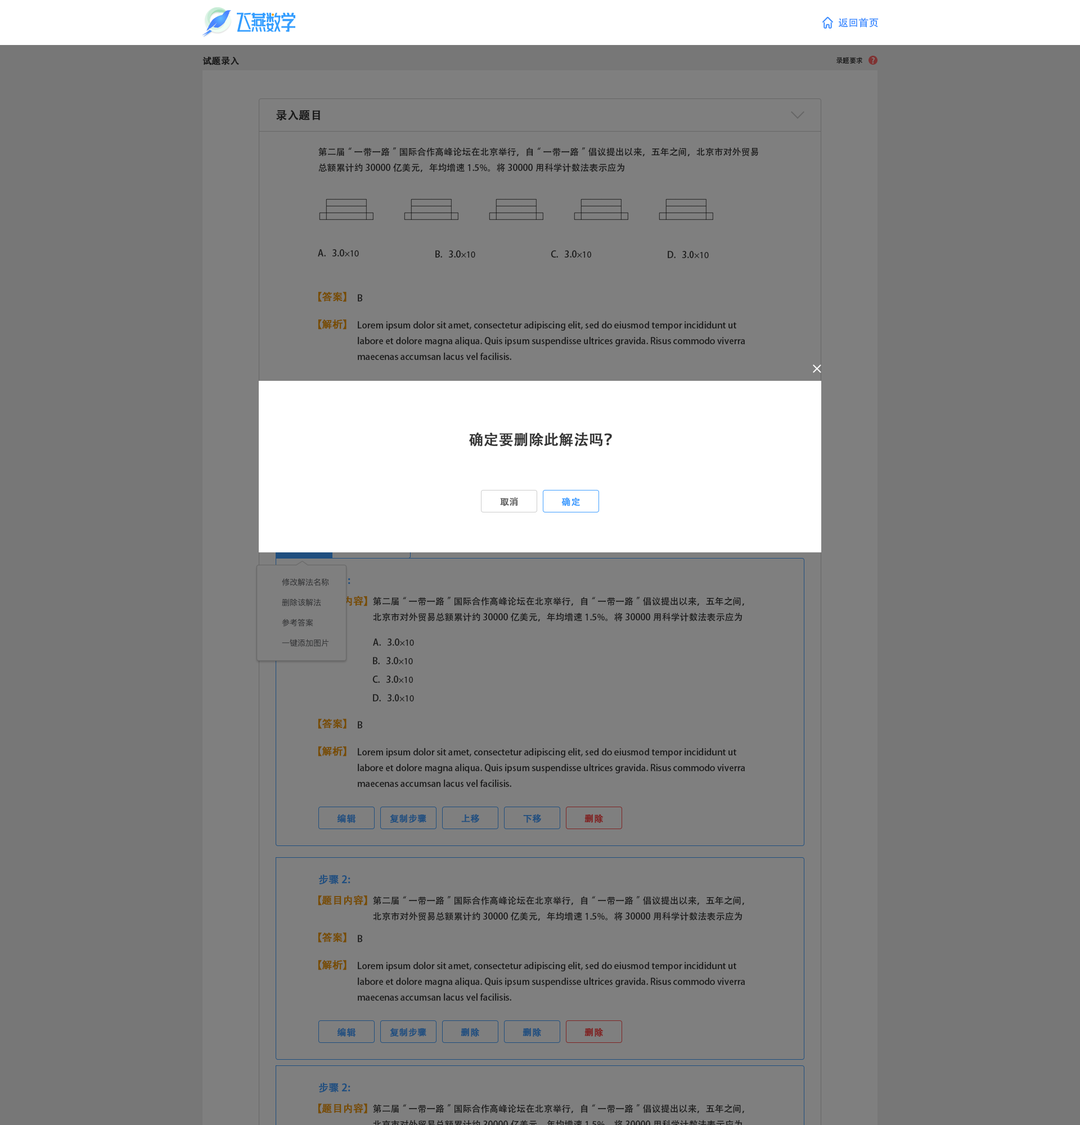
<style>
.page{position:relative;width:1080px;height:1125px;background:#7f7f7f}
.page>*{position:absolute;margin:0}
.t1{font:10.1px "AdobeHeitiStd-Regular";color:#408eff}
.t2{font:9px "AdobeHeitiStd-Regular";color:#191919;font-weight:bold}
.t3{font:6.8px "AdobeHeitiStd-Regular";color:#191919}
.t4{font:7.9px "AdobeHeitiStd-Regular";color:#7f7f7f}
.t5{font:11.2px "AdobeHeitiStd-Regular";color:#191919;font-weight:bold}
.t6{font:9px "AdobeHeitiStd-Regular";color:#191919}
.t7{font:9px "MyriadPro-Regular";color:#191919}
.t8{font:10.1px "AdobeHeitiStd-Regular";color:#774c00;font-weight:bold}
.t9{font:14.6px "AdobeHeitiStd-Regular";color:#333333;font-weight:bold}
.t10{font:9px "AdobeHeitiStd-Regular";color:#666666;font-weight:bold}
.t11{font:9px "AdobeHeitiStd-Regular";color:#409eff;font-weight:bold}
.t12{font:10.1px "AdobeHeitiStd-Regular";font-weight:bold}
.t13{font:9px "AdobeHeitiStd-Regular";color:#204f7f;font-weight:bold}
.t14{font:9px "AdobeHeitiStd-Regular";color:#7f2424;font-weight:bold}
.t15{font:10.1px "AdobeHeitiStd-Regular";color:#204f7f;font-weight:bold}
</style>
<div class="page">
<p class="t1" style="left:838px;top:17px;width:41px;height:11px">返回首页</p>
<p class="t2" style="left:202px;top:56px;width:37px;height:9px">试题录入</p>
<p class="t3" style="left:836px;top:57px;width:26px;height:7px">录题要求</p>
<p class="t4" style="left:871px;top:57px;width:4px;height:7px">?</p>
<p class="t5" style="left:276px;top:110px;width:44px;height:11px">录入题目</p>
<p class="t6" style="left:318px;top:147px;width:440px;height:25px">第二届“一带一路”国际合作高峰论坛在北京举行，自“一带一路”倡议提出以来，五年之间，北京市对外贸易总额累计约30000亿美元，年均增速1.5%。将30000用科学计数法表示应为</p>
<p class="t6" style="left:318px;top:249px;width:41px;height:7px">A.   3.0<span class="t7">×10</span></p>
<p class="t6" style="left:435px;top:250px;width:40px;height:8px">B.   3.0<span class="t7">×10</span></p>
<p class="t6" style="left:551px;top:250px;width:40px;height:8px">C.   3.0<span class="t7">×10</span></p>
<p class="t6" style="left:668px;top:251px;width:41px;height:7px">D.   3.0<span class="t7">×10</span></p>
<p class="t8" style="left:318px;top:291px;width:28px;height:11px">【答案】</p>
<p class="t6" style="left:358px;top:294px;width:5px;height:8px">B</p>
<p class="t8" style="left:318px;top:319px;width:28px;height:11px">【解析】</p>
<p class="t6" style="left:358px;top:321px;width:387px;height:39px">Lorem ipsum dolor sit amet, consectetur adipiscing elit, sed do eiusmod tempor incididunt ut labore et dolore magna aliqua. Quis ipsum suspendisse ultrices gravida. Risus commodo viverra maecenas accumsan lacus vel facilisis.</p>
<p class="t9" style="left:469px;top:432px;width:143px;height:15px">确定要删除此解法吗？</p>
<p class="t10" style="left:500px;top:497px;width:18px;height:9px">取消</p>
<p class="t11" style="left:561px;top:497px;width:19px;height:9px">确定</p>
<p class="t12" style="left:318px;top:596px;width:49px;height:10px">【题目内容】</p>
<p class="t6" style="left:373px;top:597px;width:371px;height:25px">第二届“一带一路”国际合作高峰论坛在北京举行，自“一带一路”倡议提出以来，五年之间，北京市对外贸易总额累计约30000亿美元，年均增速1.5%。将30000用科学计数法表示应为</p>
<p class="t6" style="left:373px;top:638px;width:41px;height:8px">A.   3.0<span class="t7">×10</span></p>
<p class="t6" style="left:373px;top:657px;width:40px;height:7px">B.   3.0<span class="t7">×10</span></p>
<p class="t6" style="left:372px;top:676px;width:41px;height:7px">C.   3.0<span class="t7">×10</span></p>
<p class="t6" style="left:373px;top:694px;width:41px;height:7px">D.   3.0<span class="t7">×10</span></p>
<p class="t8" style="left:318px;top:718px;width:28px;height:11px">【答案】</p>
<p class="t6" style="left:358px;top:721px;width:5px;height:7px">B</p>
<p class="t8" style="left:318px;top:746px;width:28px;height:11px">【解析】</p>
<p class="t6" style="left:358px;top:748px;width:387px;height:39px">Lorem ipsum dolor sit amet, consectetur adipiscing elit, sed do eiusmod tempor incididunt ut labore et dolore magna aliqua. Quis ipsum suspendisse ultrices gravida. Risus commodo viverra maecenas accumsan lacus vel facilisis.</p>
<p class="t13" style="left:337px;top:814px;width:19px;height:10px">编辑</p>
<p class="t13" style="left:390px;top:814px;width:36px;height:9px">复制步骤</p>
<p class="t13" style="left:461px;top:814px;width:18px;height:9px">上移</p>
<p class="t13" style="left:523px;top:814px;width:18px;height:9px">下移</p>
<p class="t14" style="left:584px;top:814px;width:20px;height:9px">删除</p>
<p class="t15" style="left:319px;top:874px;width:31px;height:11px">步骤2:</p>
<p class="t8" style="left:318px;top:895px;width:49px;height:11px">【题目内容】</p>
<p class="t6" style="left:373px;top:896px;width:371px;height:25px">第二届“一带一路”国际合作高峰论坛在北京举行，自“一带一路”倡议提出以来，五年之间，北京市对外贸易总额累计约30000亿美元，年均增速1.5%。将30000用科学计数法表示应为</p>
<p class="t8" style="left:318px;top:932px;width:28px;height:11px">【答案】</p>
<p class="t6" style="left:358px;top:935px;width:5px;height:7px">B</p>
<p class="t8" style="left:318px;top:960px;width:28px;height:10px">【解析】</p>
<p class="t6" style="left:358px;top:961px;width:387px;height:40px">Lorem ipsum dolor sit amet, consectetur adipiscing elit, sed do eiusmod tempor incididunt ut labore et dolore magna aliqua. Quis ipsum suspendisse ultrices gravida. Risus commodo viverra maecenas accumsan lacus vel facilisis.</p>
<p class="t13" style="left:337px;top:1028px;width:19px;height:9px">编辑</p>
<p class="t13" style="left:390px;top:1028px;width:36px;height:9px">复制步骤</p>
<p class="t13" style="left:461px;top:1028px;width:19px;height:9px">删除</p>
<p class="t13" style="left:523px;top:1028px;width:19px;height:9px">删除</p>
<p class="t14" style="left:584px;top:1028px;width:20px;height:9px">删除</p>
<p class="t15" style="left:319px;top:1082px;width:31px;height:11px">步骤2:</p>
<p class="t8" style="left:318px;top:1103px;width:49px;height:11px">【题目内容】</p>
</div>
